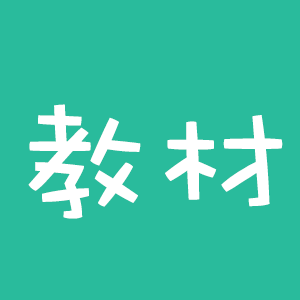
<style>
.page{position:relative;width:300px;height:300px;background:#29bb9c}
.page>*{position:absolute;margin:0}
.t1{font:141.7px "DFWaWaSC-W5";color:#ffffff}
</style>
<div class="page">
<p class="t1" style="left:28px;top:104px;width:255px;height:115px">教材</p>
</div>
